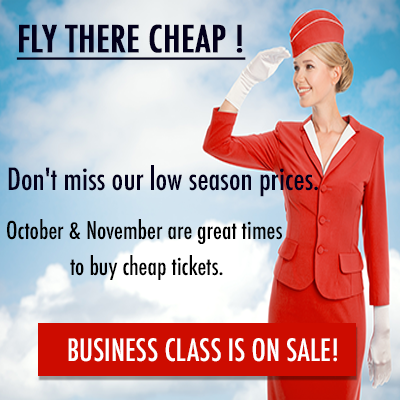
<style>
.page{position:relative;width:400px;height:400px}
.page>*{position:absolute;margin:0}
.t1{font:36px "Futura-CondensedMedium";color:#03001b;font-weight:bold;text-decoration:underline}
.t2{font:30px "Futura-CondensedMedium";color:#03001b}
.t3{font:24px/36px "Futura-CondensedMedium";color:#000000}
.t4{font:30px "Futura-CondensedMedium";color:#ffffff}
</style>
<div class="page">
<p class="t1" style="left:16px;top:24px;width:230px;height:36px">FLY THERE CHEAP !</p>
<p class="t2" style="left:8px;top:165px;width:310px;height:32px">Don't miss our low season prices.</p>
<p class="t3" style="left:7px;top:219px;width:275px;height:61px;text-align:center">October &amp; November are great times <br>to buy cheap tickets.</p>
<p class="t4" style="left:68px;top:338px;width:269px;height:24px">BUSINESS CLASS IS ON SALE!</p>
</div>
